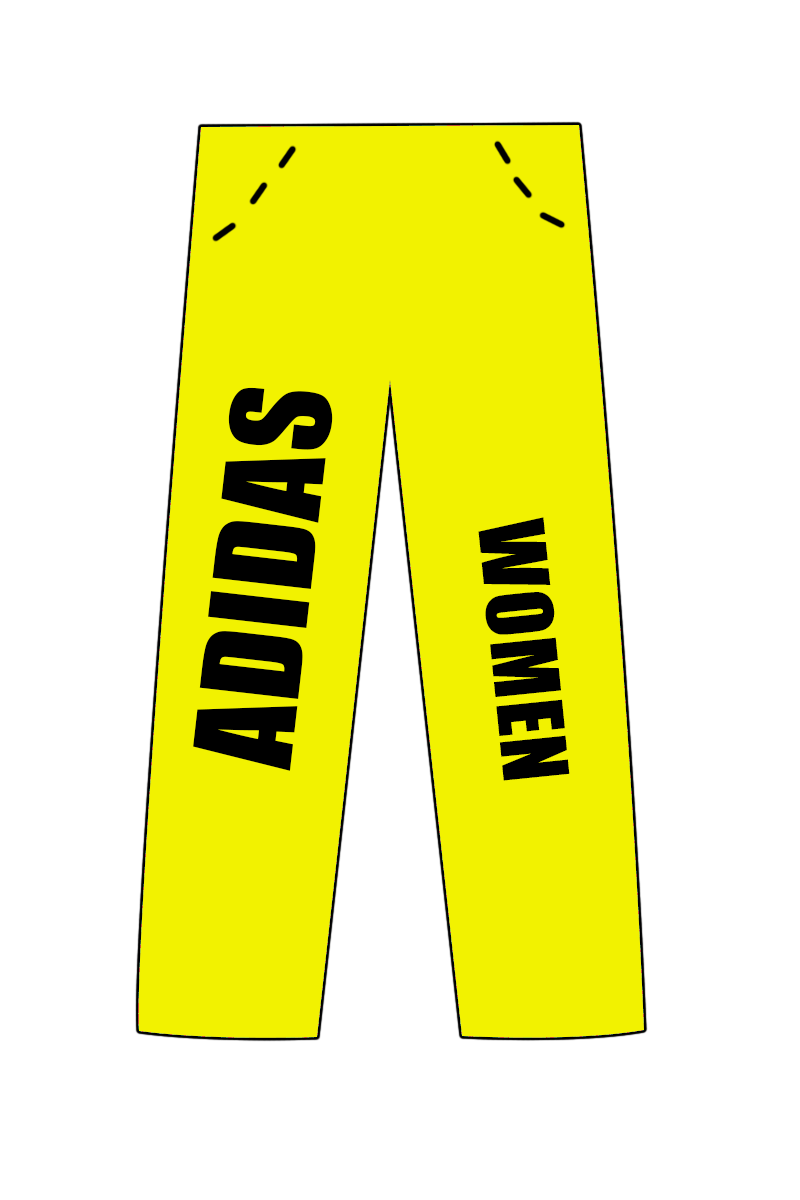
<style>
.page{position:relative;width:800px;height:1200px;background:#ffffff}
.page>*{position:absolute;margin:0}
.t1{font:125px "Impact";letter-spacing:0.025em;color:#000000}
.t2{font:83.3px "Impact";letter-spacing:0.025em;color:#000000}
</style>
<div class="page">
<p class="t1" style="left:193px;top:387px;width:140px;height:384px;rotate:-83deg">ADIDAS</p>
<p class="t2" style="left:478px;top:517px;width:92px;height:264px;rotate:84deg">WOMEN</p>
</div>
